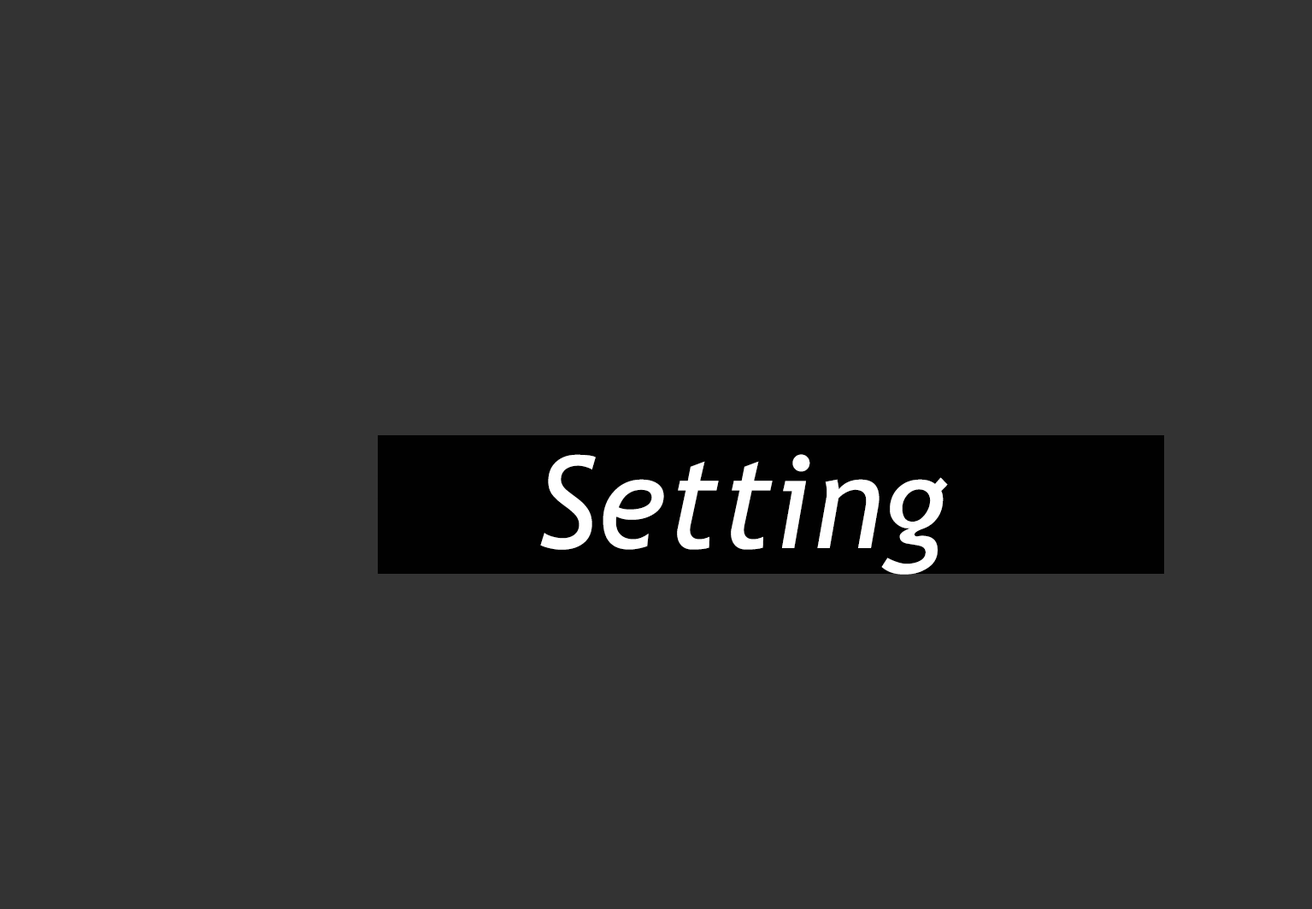
<style>
.page{position:relative;width:1312px;height:909px;background:#333333}
.page>*{position:absolute;margin:0}
.t1{font:128.2px "TrebuchetMS-Italic";color:#ffffff}
</style>
<div class="page">
<p class="t1" style="left:540px;top:454px;width:408px;height:120px">Setting</p>
</div>
